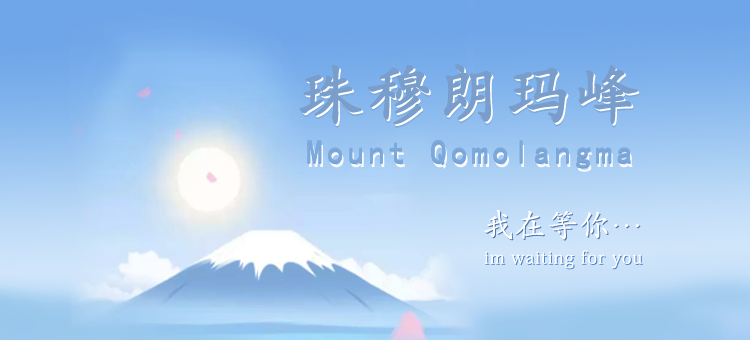
<style>
.page{position:relative;width:750px;height:340px}
.page>*{position:absolute;margin:0}
.t1{font:64.7px "KaiTi";letter-spacing:0.05em;color:#799ecb;font-weight:bold}
.t2{font:64.7px "KaiTi";letter-spacing:0.05em;font-weight:bold}
.t3{font:32.4px "KaiTi";letter-spacing:0.14em;color:#7ba9dc}
.t4{font:32.4px "KaiTi";letter-spacing:0.14em}
.t5{font:32.2px "AdobeKaitiStd-Regular";color:#ffffff}
.t6{font:32.2px "AdobeKaitiStd-Regular"}
.t7{font:17.2px "AdobeKaitiStd-Regular";letter-spacing:0.06em;color:#ffffff}
.t8{font:17.2px "AdobeKaitiStd-Regular";letter-spacing:0.06em}
</style>
<div class="page">
<p class="t1" style="left:299px;top:64px;width:339px;height:61px">珠穆朗玛峰</p>
<p class="t2" style="left:301px;top:67px;width:339px;height:61px">珠穆朗玛峰</p>
<p class="t2" style="left:301px;top:66px;width:339px;height:60px">珠穆朗玛峰</p>
<p class="t3" style="left:307px;top:141px;width:324px;height:28px">Mount Qomolangma</p>
<p class="t3" style="left:307px;top:140px;width:324px;height:27px">Mount Qomolangma</p>
<p class="t4" style="left:309px;top:144px;width:324px;height:28px">Mount Qomolangma</p>
<p class="t5" style="left:484px;top:209px;width:156px;height:31px">我在等你…</p>
<p class="t6" style="left:485px;top:210px;width:156px;height:31px">我在等你…</p>
<p class="t7" style="left:484px;top:250px;width:158px;height:19px">im waiting for you</p>
<p class="t8" style="left:485px;top:251px;width:158px;height:19px">im waiting for you</p>
</div>
